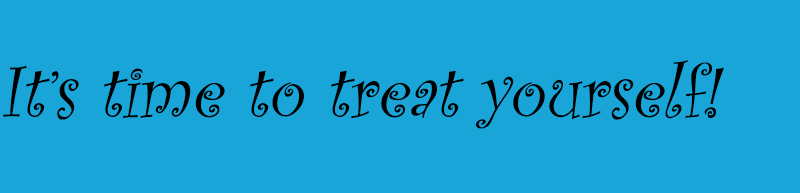
<style>
.page{position:relative;width:800px;height:193px;background:#19a5d7}
.page>*{position:absolute;margin:0}
.t1{font:75px "CurlzMT";color:#000000;font-style:italic}
</style>
<div class="page">
<p class="t1" style="left:3px;top:60px;width:721px;height:69px">It’s time to treat yourself!</p>
</div>
